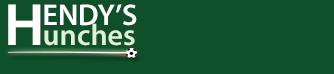
<style>
.page{position:relative;width:334px;height:74px;background:#0e502a}
.page>*{position:absolute;margin:0}
.t1{font:60px "MyriadPro-Semibold";color:#ffffff}
.t2{font:30px "MyriadPro-Semibold";color:#ffffff}
.t3{font:30px "MyriadPro-Semibold";color:#dff0d8}
</style>
<div class="page">
<p class="t1" style="left:8px;top:4px;width:33px;height:41px">H</p>
<p class="t2" style="left:44px;top:4px;width:93px;height:22px">ENDY’S</p>
<p class="t3" style="left:44px;top:23px;width:91px;height:23px">unches</p>
</div>
